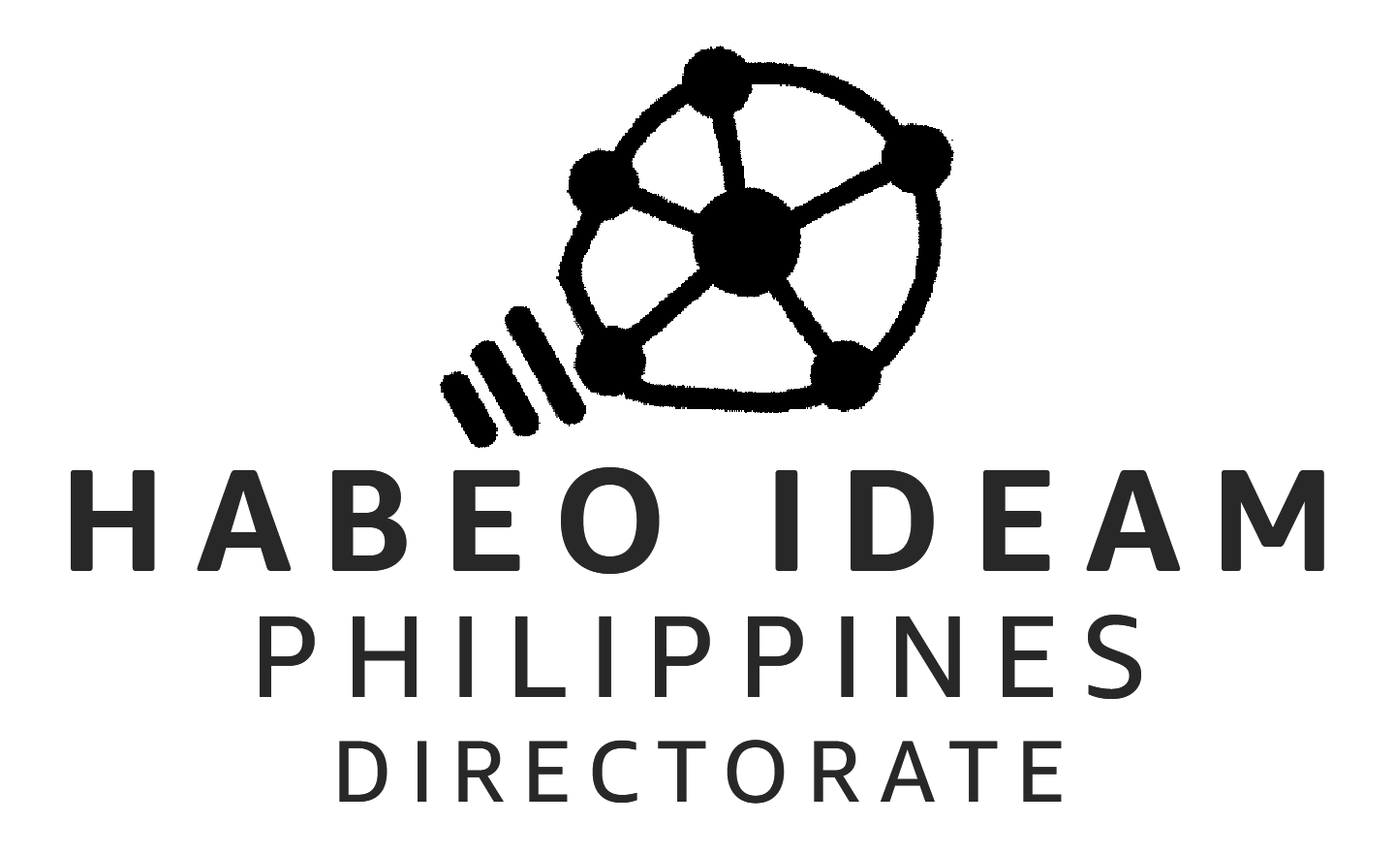
<style>
.page{position:relative;width:1395px;height:855px;background:#ffffff}
.page>*{position:absolute;margin:0}
.t1{font:145.3px "AmazonEmberDisplay-Bold";letter-spacing:0.2em;color:#282828;text-transform:uppercase}
.t2{font:116.3px "AmazonEmber-Regular";letter-spacing:0.2em;color:#282828;text-transform:uppercase}
.t3{font:87.2px "AmazonEmber-Regular";letter-spacing:0.2em;color:#282828;text-transform:uppercase}
</style>
<div class="page">
<p class="t1" style="left:71px;top:467px;width:1254px;height:107px">HABEO IDEAM</p>
<p class="t2" style="left:260px;top:614px;width:881px;height:85px">PHILIPPINES</p>
<p class="t3" style="left:339px;top:739px;width:723px;height:64px">Directorate</p>
</div>
